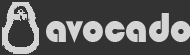
<style>
.page{position:relative;width:190px;height:55px;background:#333333}
.page>*{position:absolute;margin:0}
.t1{font:42.6px "Bauhaus93";color:#d5d5d5;scale:0.91 1}
</style>
<div class="page">
<p class="t1" style="left:46px;top:13px;width:145px;height:30px">avocado</p>
</div>
